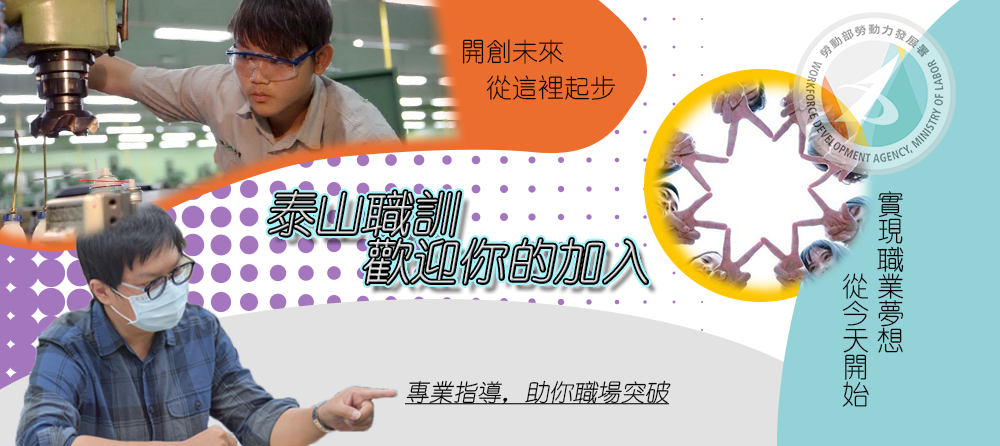
<style>
.page{position:relative;width:1000px;height:446px}
.page>*{position:absolute;margin:0}
.t1{font:26px/36px "YouYuan";color:#000000}
.t2{font:27.2px/34.9px "YouYuan";color:#000000}
.t3{font:24px "YouYuan";color:#000000;font-style:italic;text-decoration:underline}
</style>
<div class="page">
<p class="t1" style="left:462px;top:39px;width:154px;height:61px">開創未來<br>  從這裡起步</p>
<p class="t2" style="left:842px;top:191px;width:62px;height:216px">實現職業夢想<br>      從今天開始</p>
<p class="t3" style="left:405px;top:380px;width:266px;height:25px">專業指導，助你職場突破</p>
</div>
